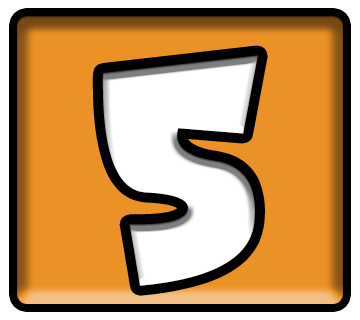
<style>
.page{position:relative;width:360px;height:320px;background:#ec9126}
.page>*{position:absolute;margin:0}
.t1{font:277.8px "Funhouse";color:#ffffff;scale:0.91 1}
</style>
<div class="page">
<p class="t1" style="left:102px;top:55px;width:156px;height:231px">5</p>
</div>
